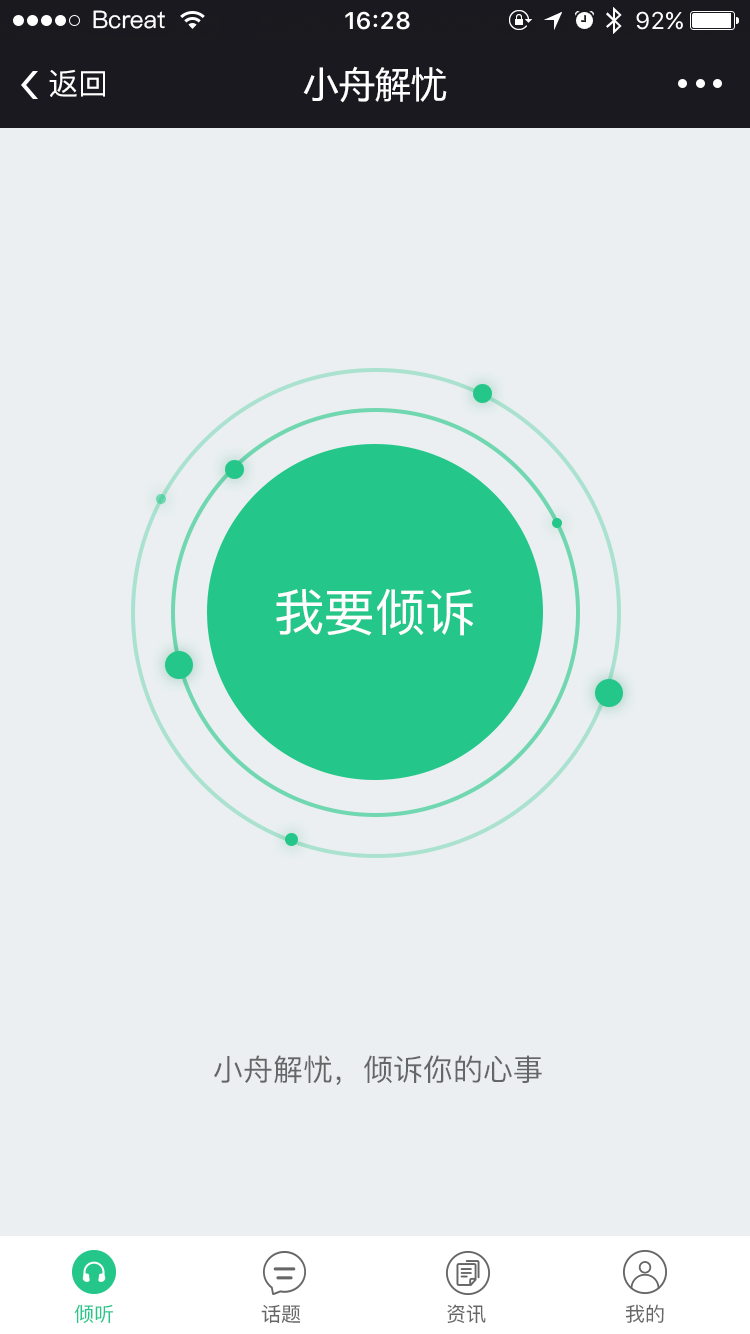
<style>
.page{position:relative;width:750px;height:1334px;background:#ebeff1}
.page>*{position:absolute;margin:0}
.t1{font:24px "PingFang-SC-Medium";color:#ffffff}
.t2{font:30px "PingFang-SC-Medium";color:#ffffff}
.t3{font:36px "MicrosoftYaHei";color:#ffffff}
.t4{font:50.3px "PingFang-SC-Medium";color:#ffffff}
.t5{font:30px "PingFang-SC-Medium";color:#666666}
.t6{font:20px "PingFang-SC-Medium";color:#24c789}
.t7{font:20px "PingFang-SC-Medium";color:#666666}
</style>
<div class="page">
<p class="t1" style="left:93px;top:10px;width:72px;height:19px">Bcreat</p>
<p class="t2" style="left:49px;top:69px;width:56px;height:28px">返回</p>
<p class="t3" style="left:303px;top:66px;width:144px;height:37px">小舟解忧</p>
<p class="t4" style="left:276px;top:589px;width:197px;height:47px">我要倾诉</p>
<p class="t5" style="left:214px;top:1055px;width:328px;height:30px">小舟解忧，倾诉你的心事</p>
<p class="t6" style="left:74px;top:1304px;width:39px;height:20px">倾听</p>
<p class="t7" style="left:261px;top:1304px;width:40px;height:20px">话题</p>
<p class="t7" style="left:447px;top:1304px;width:39px;height:20px">资讯</p>
<p class="t7" style="left:625px;top:1304px;width:39px;height:19px">我的</p>
</div>
